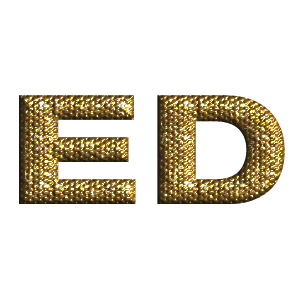
<style>
.page{position:relative;width:300px;height:300px;background:#ffffff}
.page>*{position:absolute;margin:0}
.t1{font:154.2px "THE_DONALD";letter-spacing:0.025em;text-transform:uppercase}
</style>
<div class="page">
<p class="t1" style="left:19px;top:95px;width:117px;height:109px">E</p>
<p class="t1" style="left:19px;top:95px;width:117px;height:109px">E</p>
<p class="t1" style="left:157px;top:95px;width:128px;height:109px">D</p>
<p class="t1" style="left:157px;top:95px;width:128px;height:109px">D</p>
</div>
